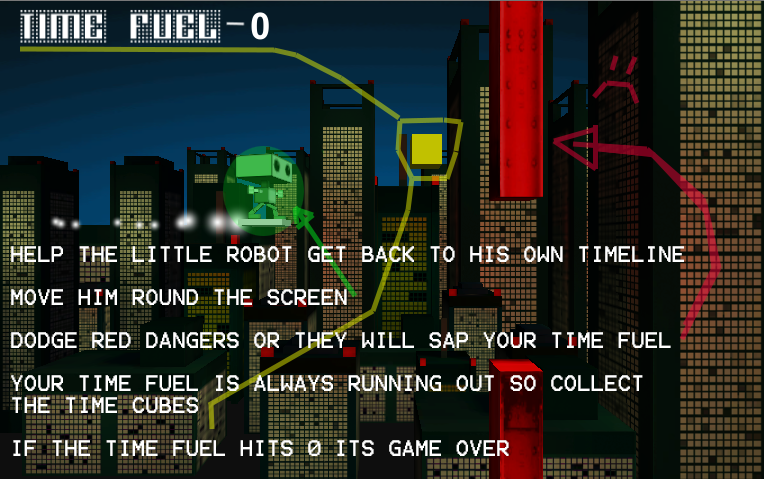
<style>
.page{position:relative;width:764px;height:479px}
.page>*{position:absolute;margin:0}
.t1{font:18px "Terminal";color:#ffffff}
</style>
<div class="page">
<p class="t1" style="left:11px;top:246px;width:673px;height:210px;text-align:right">HELP THE LITTLE ROBOT GET BACK TO HIS OWN TIMELINE<br><br>MOVE HIM ROUND THE SCREEN<br><br>DODGE RED DANGERS OR THEY WILL SAP YOUR TIME FUEL<br><br>YOUR TIME FUEL IS ALWAYS RUNNING OUT SO COLLECT THE TIME CUBES<br><br>IF THE TIME FUEL HITS 0 ITS GAME OVER</p>
</div>
